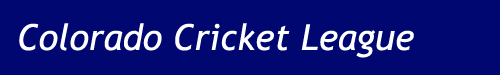
<style>
.page{position:relative;width:500px;height:75px;background:#000770}
.page>*{position:absolute;margin:0}
.t1{font:36px "TrebuchetMS-Italic";color:#ffffff}
</style>
<div class="page">
<p class="t1" style="left:19px;top:23px;width:395px;height:35px">Colorado Cricket League</p>
</div>
